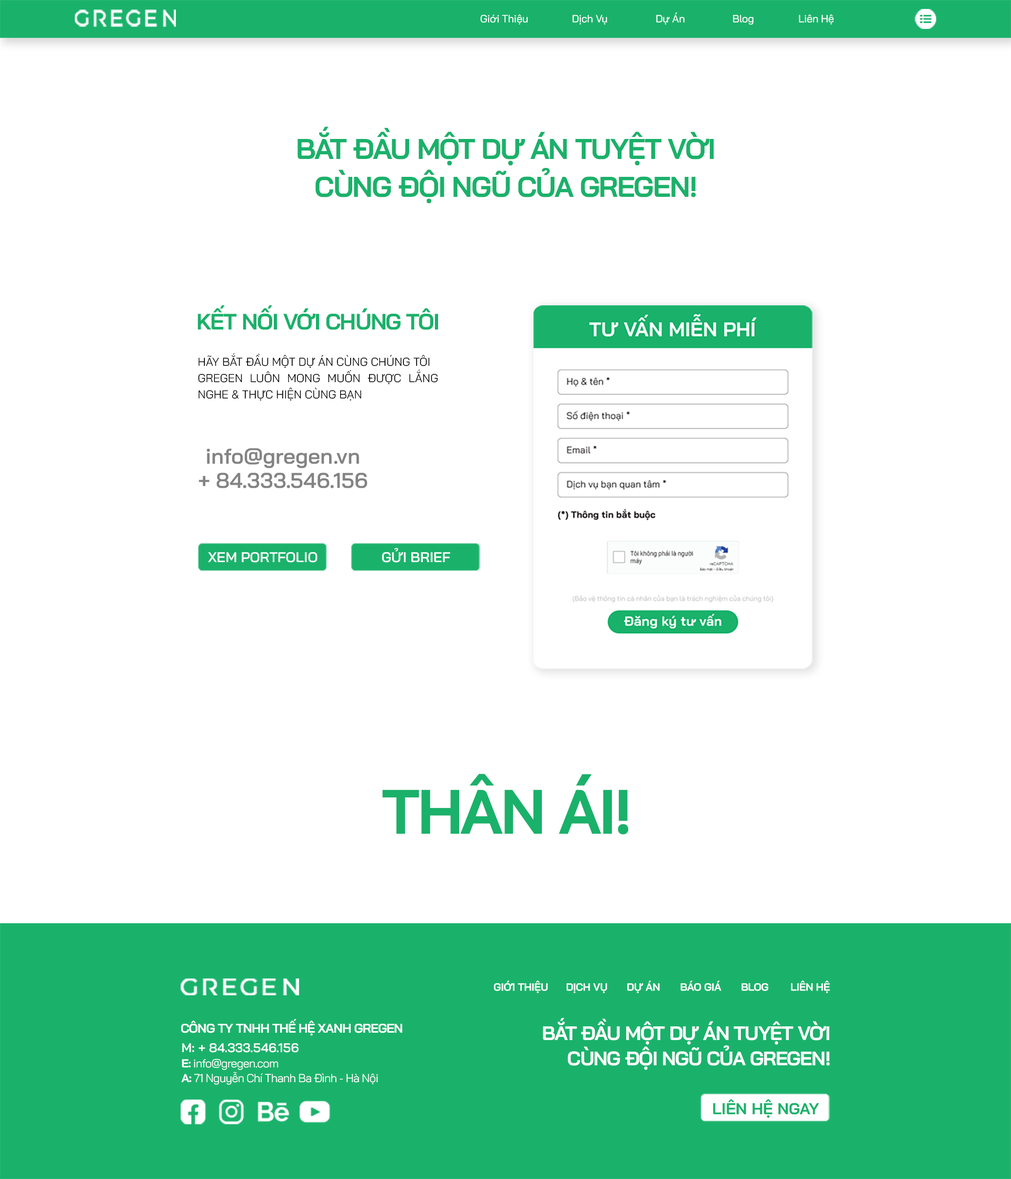
<style>
.page{position:relative;width:1011px;height:1179px;background:#ffffff}
.page>*{position:absolute;margin:0}
.t1{font:10.6px "BaiJamjuree-Medium";letter-spacing:-0.02em;color:#ffffff}
.t2{font:28.5px/37.8px "BaiJamjuree-Bold";letter-spacing:-0.04em;color:#1ab16a}
.t3{font:22.4px "BaiJamjuree-Bold";letter-spacing:-0.04em;color:#1ab16a}
.t4{font:11.5px/16.2px "BaiJamjuree-Regular";color:#000000}
.t5{font:21.4px/24.4px "BaiJamjuree-SemiBold";color:#838383}
.t6{font:14.1px "BaiJamjuree-SemiBold";color:#ffffff}
.t7{font:62.6px "BaiJamjuree-Bold";letter-spacing:-0.04em;color:#1ab16a}
.t8{font:10.6px "BaiJamjuree-Bold";letter-spacing:-0.02em;color:#ffffff;text-transform:uppercase}
.t9{font:12.6px "BaiJamjuree-Bold";letter-spacing:-0.04em;color:#ffffff}
.t10{font:19.6px/25.2px "BaiJamjuree-Bold";letter-spacing:-0.04em;color:#ffffff}
.t11{font:11.6px/15.2px "BaiJamjuree-Regular";letter-spacing:-0.04em;color:#ffffff}
.t12{font:12.6px/26px "BaiJamjuree-SemiBold";color:#ffffff}
.t13{font:11.6px/15.2px "BaiJamjuree-Bold";letter-spacing:-0.04em;color:#ffffff}
.t14{font:15.8px "BaiJamjuree-Bold";color:#1ab26b}
</style>
<div class="page">
<p class="t1" style="left:480px;top:12px;width:354px;height:13px">Giới Thiệu                  Dịch Vụ                   Dự Án                   Blog                  Liên Hệ</p>
<p class="t2" style="left:298px;top:126px;width:416px;height:78px;text-align:center">BẮT ĐẦU MỘT DỰ ÁN TUYỆT VỜI<br>CÙNG ĐỘI NGŨ CỦA GREGEN!</p>
<p class="t3" style="left:197px;top:305px;width:241px;height:25px">KẾT NỐI VỚI CHÚNG TÔI</p>
<p class="t4" style="left:198px;top:353px;width:240px;height:48px;text-align:justify">HÃY BẮT ĐẦU MỘT DỰ ÁN CÙNG CHÚNG TÔI<br>GREGEN LUÔN MONG MUỐN ĐƯỢC LẮNG NGHE &amp; THỰC HIỆN CÙNG BẠN</p>
<p class="t5" style="left:199px;top:448px;width:169px;height:41px;text-align:center">info@gregen.vn<br>+ 84.333.546.156</p>
<p class="t6" style="left:208px;top:552px;width:110px;height:11px">XEM PORTFOLIO</p>
<p class="t6" style="left:382px;top:548px;width:68px;height:15px">GỬI BRIEF</p>
<p class="t7" style="left:382px;top:774px;width:247px;height:61px">THÂN ÁI!</p>
<p class="t8" style="left:494px;top:981px;width:336px;height:13px">Giới Thiệu        Dịch Vụ        Dự Án        Báo Giá        Blog         Liên Hệ</p>
<p class="t9" style="left:181px;top:1019px;width:221px;height:17px">CÔNG TY TNHH THẾ HỆ XANH GREGEN</p>
<p class="t10" style="left:543px;top:1018px;width:287px;height:52px;text-align:right">BẮT ĐẦU MỘT DỰ ÁN TUYỆT VỜI<br>CÙNG ĐỘI NGŨ CỦA GREGEN!</p>
<p class="t11" style="left:181px;top:1044px;width:197px;height:41px"><span class="t12">M: + 84.333.546.156<br></span><span class="t13">E:</span> info@gregen.com<br><span class="t13">A: </span>71 Nguyễn Chí Thanh Ba Đình - Hà Nội</p>
<p class="t14" style="left:713px;top:1099px;width:106px;height:19px">LIÊN HỆ NGAY</p>
</div>
